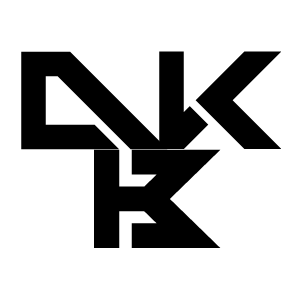
<style>
.page{position:relative;width:300px;height:300px;background:#ffffff}
.page>*{position:absolute;margin:0}
.t1{font:194.4px "TechnoHideo";color:#000000}
.t2{font:196.1px "TechnoHideo";color:#000000}
</style>
<div class="page">
<p class="t1" style="left:21px;top:51px;width:147px;height:99px">D</p>
<p class="t1" style="left:159px;top:51px;width:122px;height:98px">K</p>
<p class="t2" style="left:94px;top:149px;width:127px;height:99px">B</p>
</div>
